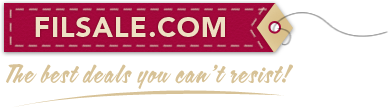
<style>
.page{position:relative;width:389px;height:108px;background:#ffffff}
.page>*{position:absolute;margin:0}
.t1{font:24px "CalgaryScriptOT";letter-spacing:0.075em;color:#d7c297}
</style>
<div class="page">
<p class="t1" style="left:6px;top:64px;width:287px;height:25px">The best deals you can’t resist!</p>
</div>
